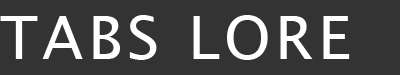
<style>
.page{position:relative;width:400px;height:75px;background:#333333}
.page>*{position:absolute;margin:0}
.t1{font:60px "LucidaSansUnicode";letter-spacing:0.075em;color:#ffffff}
</style>
<div class="page">
<p class="t1" style="left:0px;top:15px;width:350px;height:45px">TABS LORE</p>
</div>
